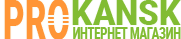
<style>
.page{position:relative;width:181px;height:39px;background:#ffffff}
.page>*{position:absolute;margin:0}
.t1{font:35px "Roboto-Black";color:#81bc33;scale:0.94 1}
.t2{font:16.1px "Roboto-Black";color:#81bc33;scale:0.66 1}
</style>
<div class="page">
<p class="t1" style="left:72px;top:0px;width:109px;height:25px">KANSK</p>
<p class="t2" style="left:73px;top:27px;width:108px;height:12px">ИНТЕРНЕТ МАГАЗИН</p>
</div>
